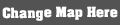
<style>
.page{position:relative;width:120px;height:25px;background:#535353}
.page>*{position:absolute;margin:0}
.t1{font:13.5px "AcmeFont";color:#ffffff}
</style>
<div class="page">
<p class="t1" style="left:2px;top:6px;width:116px;height:15px">Change Map Here</p>
</div>
